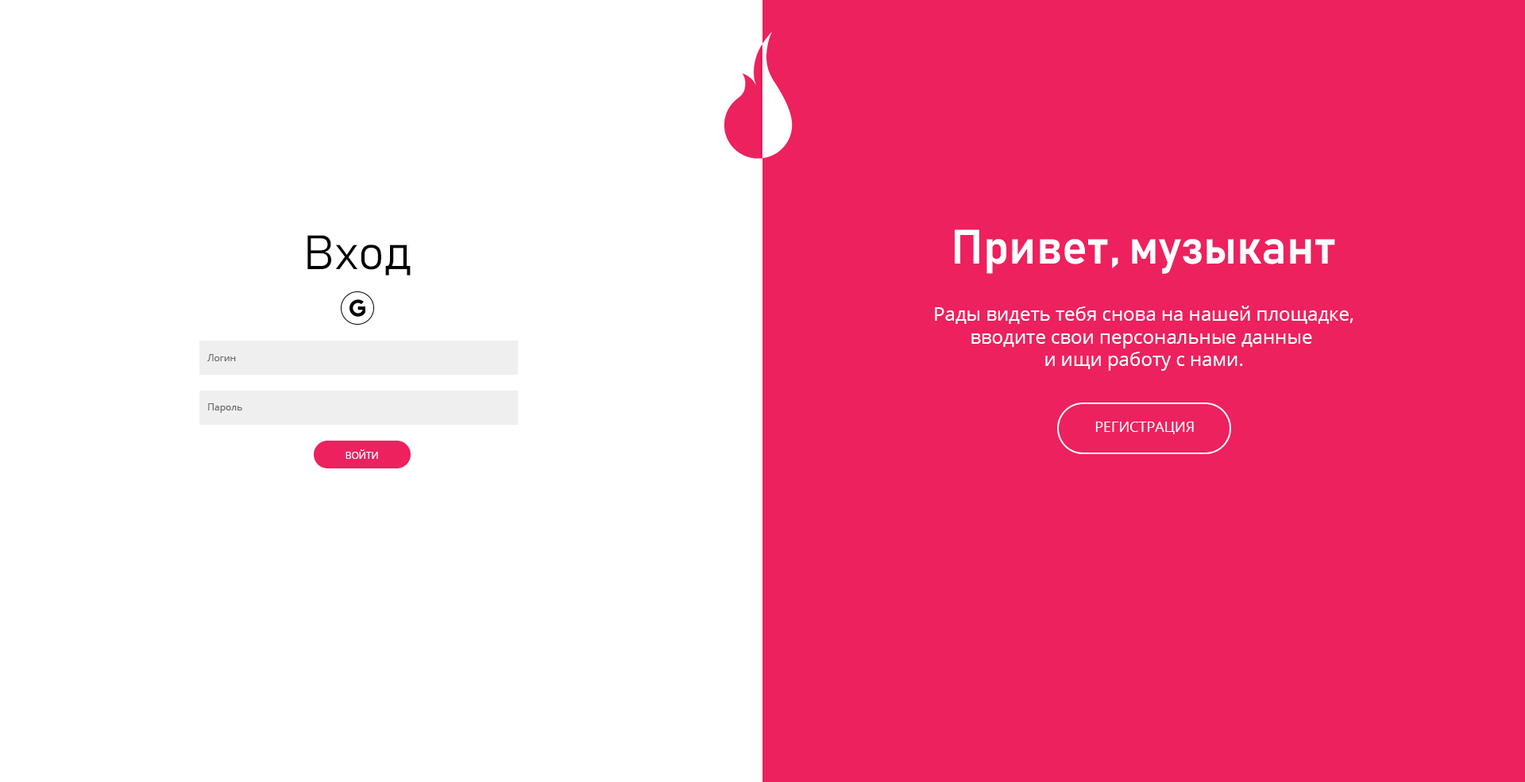
<style>
.page{position:relative;width:1525px;height:782px;background:#ed215e}
.page>*{position:absolute;margin:0}
.t1{font:47.6px "Bahnschrift-SemiBold";color:#ffffff}
.t2{font:47.6px "Bahnschrift-Light";color:#000000}
.t3{font:19.1px "OpenSans";color:#ffffff}
.t4{font:9.5px "OpenSans";color:#656565}
.t5{font:14.3px "OpenSans";color:#ffffff;text-transform:uppercase}
.t6{font:9.5px "OpenSans";color:#ffffff;text-transform:uppercase}
</style>
<div class="page">
<p class="t1" style="left:954px;top:229px;width:381px;height:45px">Привет, музыкант</p>
<p class="t2" style="left:307px;top:235px;width:104px;height:41px">Вход</p>
<p class="t3" style="left:935px;top:306px;width:418px;height:65px;text-align:center">Рады видеть тебя снова на нашей площадке,<br>вводите свои персональные данные <br>и ищи работу с нами.</p>
<p class="t4" style="left:207px;top:354px;width:29px;height:7px">Логин</p>
<p class="t4" style="left:208px;top:403px;width:34px;height:10px">Пароль</p>
<p class="t5" style="left:1095px;top:422px;width:98px;height:12px">Регистрация</p>
<p class="t6" style="left:345px;top:449px;width:33px;height:10px">Войти</p>
</div>
